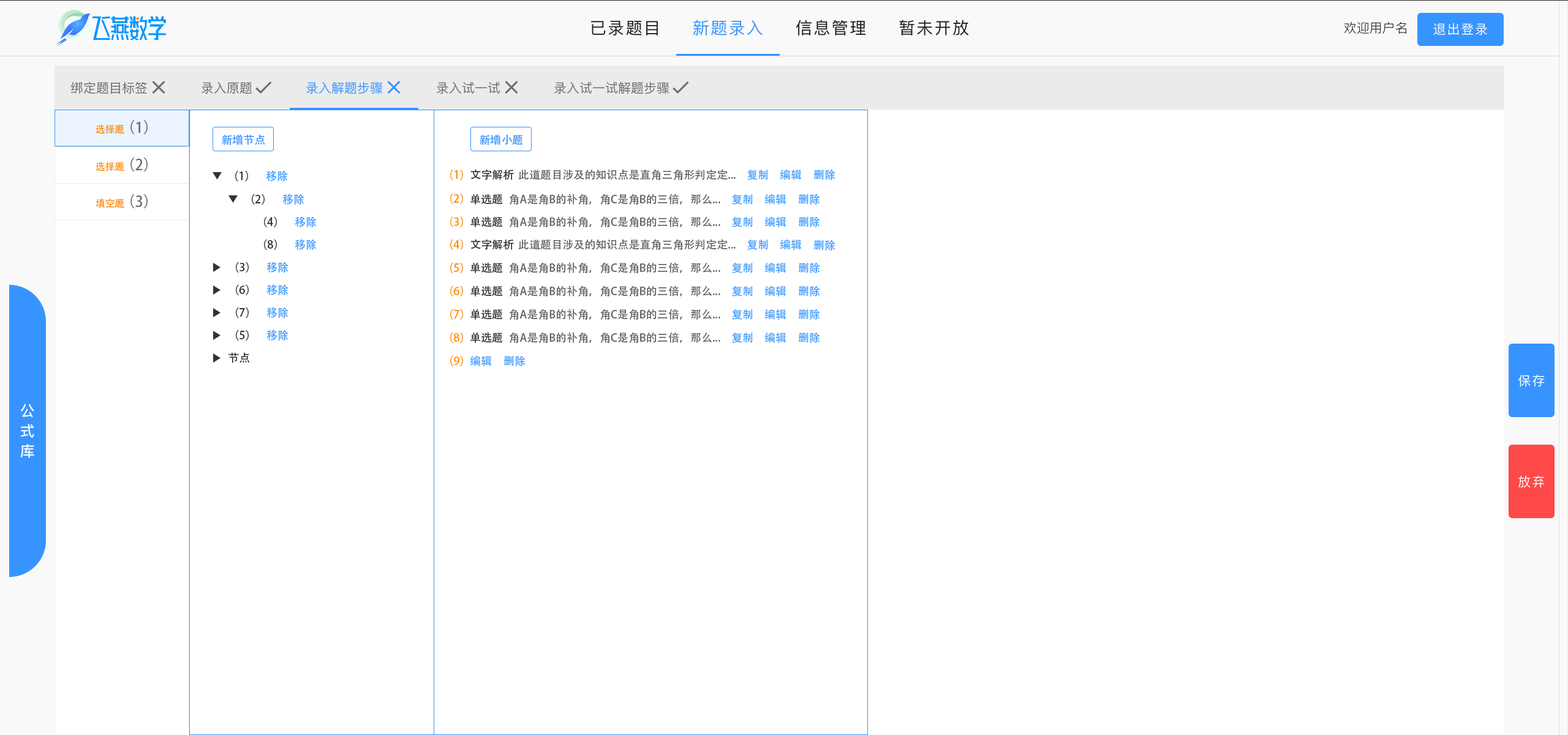
<style>
.page{position:relative;width:1568px;height:735px;background:#ffffff}
.page>*{position:absolute;margin:0}
.t1{font:9.8px "AdobeHeitiStd-Regular";color:#fe8e05}
.t2{font:14.7px "AdobeHeitiStd-Regular";color:#6c6c6c}
.t3{font:11px "AdobeHeitiStd-Regular";color:#3794ff}
.t4{font:11px "AdobeHeitiStd-Regular";color:#333333}
.t5{font:11px "AdobeHeitiStd-Regular";color:#409eff}
.t6{font:11px "AdobeHeitiStd-Regular";color:#fe8e05}
.t7{font:11px "AdobeHeitiStd-Regular";color:#666666}
</style>
<div class="page">
<p class="t1" style="left:96px;top:124px;width:28px;height:10px">选择题</p>
<p class="t2" style="left:130px;top:120px;width:18px;height:14px">（1）</p>
<p class="t3" style="left:222px;top:134px;width:43px;height:11px">新增节点</p>
<p class="t3" style="left:480px;top:134px;width:43px;height:11px">新增小题</p>
<p class="t1" style="left:96px;top:162px;width:28px;height:10px">选择题</p>
<p class="t2" style="left:130px;top:157px;width:18px;height:15px">（2）</p>
<p class="t4" style="left:235px;top:170px;width:13px;height:11px">（1）</p>
<p class="t5" style="left:266px;top:170px;width:22px;height:11px">移除</p>
<p class="t6" style="left:450px;top:169px;width:13px;height:11px">（1）</p>
<p class="t4" style="left:470px;top:169px;width:44px;height:11px">文字解析</p>
<p class="t7" style="left:518px;top:169px;width:218px;height:11px">此道题目涉及的知识点是直角三角形判定定...</p>
<p class="t5" style="left:747px;top:170px;width:21px;height:10px">复制</p>
<p class="t5" style="left:780px;top:169px;width:22px;height:11px">编辑</p>
<p class="t5" style="left:813px;top:170px;width:22px;height:10px">删除</p>
<p class="t2" style="left:130px;top:194px;width:18px;height:14px">（3）</p>
<p class="t4" style="left:252px;top:194px;width:13px;height:11px">（2）</p>
<p class="t5" style="left:282px;top:194px;width:22px;height:11px">移除</p>
<p class="t6" style="left:450px;top:193px;width:13px;height:11px">（2）</p>
<p class="t4" style="left:470px;top:194px;width:33px;height:11px">单选题</p>
<p class="t7" style="left:509px;top:194px;width:211px;height:11px">角A是角B的补角，角C是角B的三倍，那么...</p>
<p class="t5" style="left:732px;top:194px;width:21px;height:11px">复制</p>
<p class="t5" style="left:764px;top:194px;width:22px;height:11px">编辑</p>
<p class="t5" style="left:798px;top:194px;width:22px;height:11px">删除</p>
<p class="t1" style="left:96px;top:198px;width:28px;height:10px">填空题</p>
<p class="t4" style="left:264px;top:216px;width:13px;height:11px">（4）</p>
<p class="t5" style="left:295px;top:216px;width:22px;height:11px">移除</p>
<p class="t6" style="left:450px;top:216px;width:13px;height:11px">（3）</p>
<p class="t4" style="left:470px;top:216px;width:33px;height:11px">单选题</p>
<p class="t7" style="left:509px;top:216px;width:211px;height:11px">角A是角B的补角，角C是角B的三倍，那么...</p>
<p class="t5" style="left:732px;top:217px;width:21px;height:10px">复制</p>
<p class="t5" style="left:764px;top:216px;width:22px;height:11px">编辑</p>
<p class="t5" style="left:798px;top:217px;width:22px;height:10px">删除</p>
<p class="t4" style="left:264px;top:239px;width:13px;height:11px">（8）</p>
<p class="t5" style="left:295px;top:239px;width:22px;height:11px">移除</p>
<p class="t6" style="left:450px;top:239px;width:13px;height:11px">（4）</p>
<p class="t4" style="left:470px;top:239px;width:44px;height:11px">文字解析</p>
<p class="t7" style="left:518px;top:239px;width:218px;height:11px">此道题目涉及的知识点是直角三角形判定定...</p>
<p class="t5" style="left:747px;top:239px;width:21px;height:11px">复制</p>
<p class="t5" style="left:780px;top:239px;width:22px;height:11px">编辑</p>
<p class="t5" style="left:813px;top:240px;width:22px;height:11px">删除</p>
<p class="t4" style="left:236px;top:262px;width:13px;height:11px">（3）</p>
<p class="t5" style="left:266px;top:262px;width:22px;height:11px">移除</p>
<p class="t6" style="left:450px;top:262px;width:13px;height:11px">（5）</p>
<p class="t4" style="left:470px;top:262px;width:33px;height:11px">单选题</p>
<p class="t7" style="left:509px;top:262px;width:211px;height:11px">角A是角B的补角，角C是角B的三倍，那么...</p>
<p class="t5" style="left:732px;top:263px;width:21px;height:10px">复制</p>
<p class="t5" style="left:764px;top:262px;width:22px;height:11px">编辑</p>
<p class="t5" style="left:798px;top:263px;width:22px;height:10px">删除</p>
<p class="t4" style="left:236px;top:284px;width:13px;height:11px">（6）</p>
<p class="t5" style="left:266px;top:284px;width:22px;height:11px">移除</p>
<p class="t6" style="left:450px;top:285px;width:13px;height:11px">（6）</p>
<p class="t4" style="left:470px;top:285px;width:33px;height:11px">单选题</p>
<p class="t7" style="left:509px;top:285px;width:211px;height:11px">角A是角B的补角，角C是角B的三倍，那么...</p>
<p class="t5" style="left:732px;top:286px;width:21px;height:10px">复制</p>
<p class="t5" style="left:764px;top:285px;width:22px;height:11px">编辑</p>
<p class="t5" style="left:798px;top:286px;width:22px;height:10px">删除</p>
<p class="t4" style="left:236px;top:307px;width:13px;height:11px">（7）</p>
<p class="t5" style="left:266px;top:307px;width:22px;height:11px">移除</p>
<p class="t6" style="left:450px;top:309px;width:13px;height:11px">（7）</p>
<p class="t4" style="left:470px;top:309px;width:33px;height:11px">单选题</p>
<p class="t7" style="left:509px;top:309px;width:211px;height:11px">角A是角B的补角，角C是角B的三倍，那么...</p>
<p class="t5" style="left:732px;top:309px;width:21px;height:11px">复制</p>
<p class="t5" style="left:764px;top:309px;width:22px;height:11px">编辑</p>
<p class="t5" style="left:798px;top:309px;width:22px;height:11px">删除</p>
<p class="t4" style="left:236px;top:330px;width:13px;height:11px">（5）</p>
<p class="t5" style="left:266px;top:330px;width:22px;height:11px">移除</p>
<p class="t6" style="left:450px;top:332px;width:13px;height:11px">（8）</p>
<p class="t4" style="left:470px;top:332px;width:33px;height:11px">单选题</p>
<p class="t7" style="left:509px;top:332px;width:211px;height:11px">角A是角B的补角，角C是角B的三倍，那么...</p>
<p class="t5" style="left:732px;top:333px;width:21px;height:10px">复制</p>
<p class="t5" style="left:764px;top:332px;width:22px;height:11px">编辑</p>
<p class="t5" style="left:798px;top:333px;width:22px;height:10px">删除</p>
<p class="t4" style="left:228px;top:352px;width:22px;height:11px">节点</p>
<p class="t6" style="left:450px;top:355px;width:13px;height:11px">（9）</p>
<p class="t5" style="left:470px;top:355px;width:22px;height:11px">编辑</p>
<p class="t5" style="left:503px;top:356px;width:23px;height:10px">删除</p>
</div>
